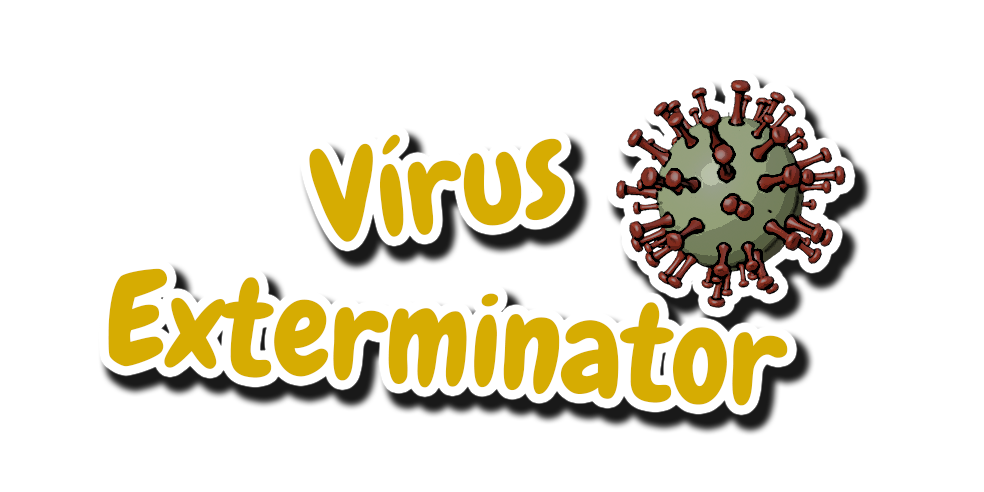
<style>
.page{position:relative;width:984px;height:492px;background:#ffffff}
.page>*{position:absolute;margin:0}
.t1{font:129.9px "Chewy-Regular";color:#d6ac02}
</style>
<div class="page">
<p class="t1" style="left:309px;top:134px;width:257px;height:108px;rotate:-7deg">Vírus</p>
<p class="t1" style="left:108px;top:268px;width:680px;height:138px;rotate:4deg">Exterminator</p>
</div>
